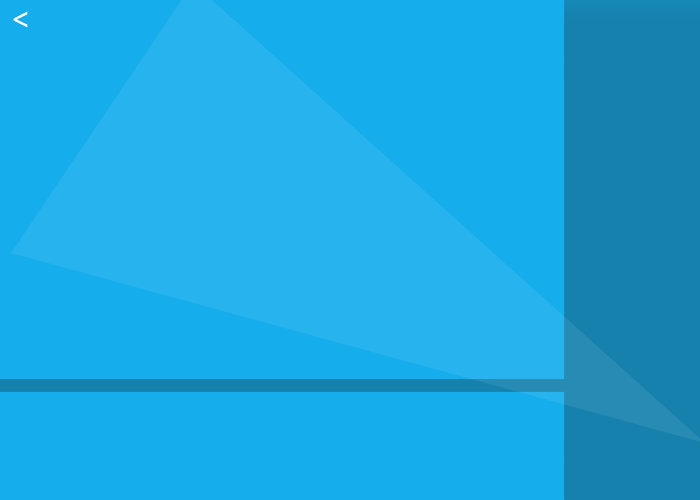
<style>
.page{position:relative;width:700px;height:500px;background:#15adeb}
.page>*{position:absolute;margin:0}
.t1{font:25px "AdobeHeitiStd-Regular";color:#ffffff}
</style>
<div class="page">
<p class="t1" style="left:13px;top:11px;width:15px;height:17px">&lt;</p>
</div>
